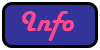
<style>
.page{position:relative;width:100px;height:50px;background:#333399}
.page>*{position:absolute;margin:0}
.t1{font:30px "HarlowSolid";color:#ff478b}
</style>
<div class="page">
<p class="t1" style="left:22px;top:11px;width:52px;height:30px">Info</p>
</div>
